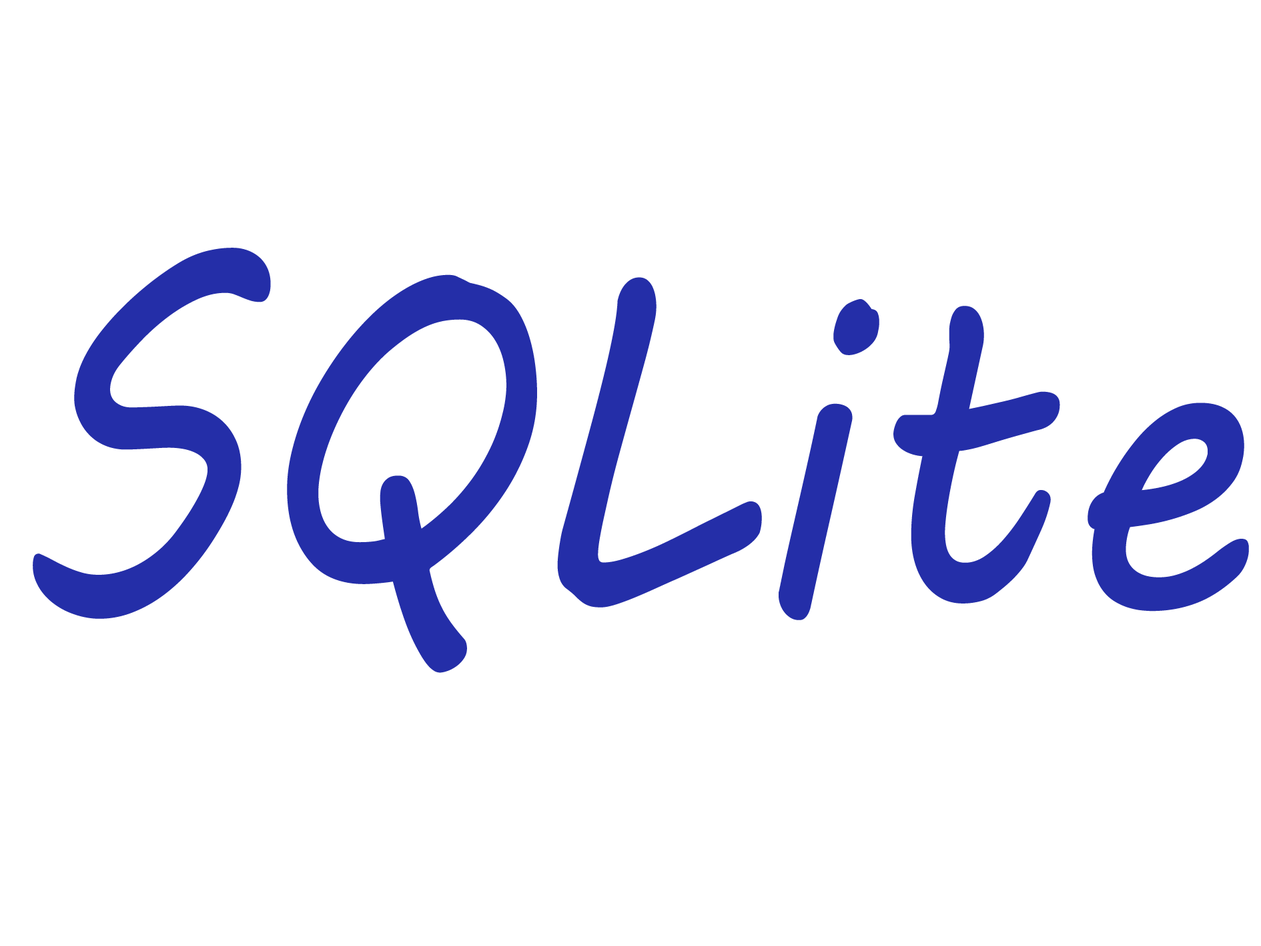
<style>
.page{position:relative;width:1261px;height:946px;background:#ffffff}
.page>*{position:absolute;margin:0}
.t1{font:466.8px "MVBoli";color:#242ea8;scale:0.84 1}
</style>
<div class="page">
<p class="t1" style="left:33px;top:248px;width:1216px;height:425px">SQLite</p>
</div>
